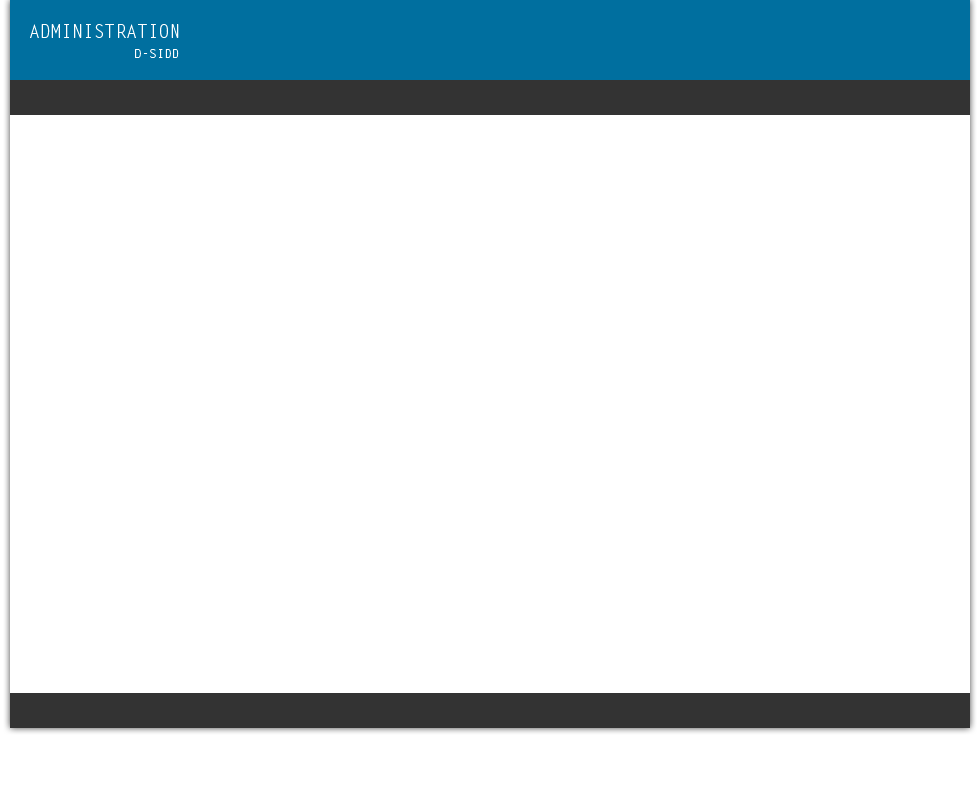
<style>
.page{position:relative;width:980px;height:800px;background:#ffffff}
.page>*{position:absolute;margin:0}
.t1{font:18px "LetterGothicStd";color:#ffffff}
.t2{font:12px "LetterGothicStd";color:#ffffff;scale:1.05 1}
</style>
<div class="page">
<p class="t1" style="left:30px;top:24px;width:149px;height:14px">ADMINISTRATION</p>
<p class="t2" style="left:135px;top:49px;width:44px;height:9px">D-SIDD</p>
</div>
